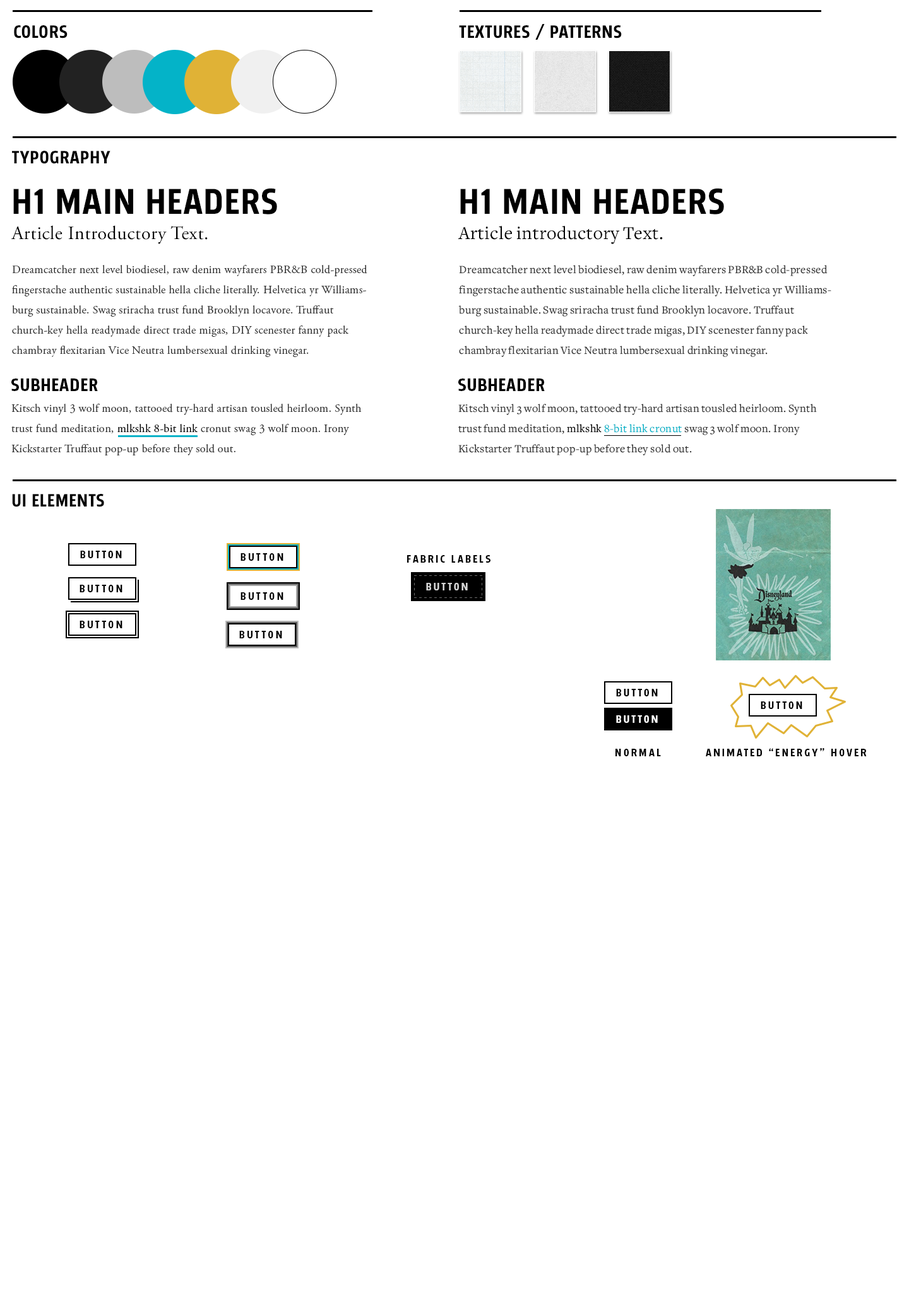
<style>
.page{position:relative;width:909px;height:1312px;background:#ffffff}
.page>*{position:absolute;margin:0}
.t1{font:18.8px "Breakers-Bold";letter-spacing:0.02em;color:#000000}
.t2{font:18.8px "Breakers-Bold";letter-spacing:0.02em;color:#000000;text-transform:uppercase}
.t3{font:37.9px "Breakers-Bold";letter-spacing:0.02em;color:#000000;text-transform:uppercase}
.t4{font:18.9px "AGaramondPro-Regular";letter-spacing:0.02em;color:#000000}
.t5{font:18.9px "Freight-TextBook";letter-spacing:0.02em;color:#000000}
.t6{font:11.4px/20.2px "AGaramondPro-Regular";letter-spacing:0.02em;color:#333333}
.t7{font:11.4px/20.2px "Freight-TextBook";letter-spacing:0.02em;color:#333333}
.t8{font:18.9px "Breakers-Bold";letter-spacing:0.02em;color:#000000}
.t9{font:11.4px/20.2px "AGaramondPro-Regular";letter-spacing:0.02em;color:#000000}
.t10{font:11.4px/20.2px "Freight-TextBook";letter-spacing:0.02em;color:#000000}
.t11{font:11.4px/20.2px "Freight-TextBook";letter-spacing:0.02em;color:#04b3c8}
.t12{font:11.4px "Breakers-Bold";letter-spacing:0.16em;color:#000000}
.t13{font:11.4px "Breakers-Bold";letter-spacing:0.18em;color:#000000}
.t14{font:11.4px "Breakers-Bold";letter-spacing:0.16em;color:#d5d5d5}
.t15{font:11.4px "Breakers-Bold";letter-spacing:0.16em;color:#ffffff}
</style>
<div class="page">
<p class="t1" style="left:14px;top:25px;width:54px;height:13px">COLORS</p>
<p class="t1" style="left:459px;top:24px;width:162px;height:16px">TEXTURES / PATTERNS</p>
<p class="t2" style="left:12px;top:151px;width:98px;height:13px">TYPOGRAPHY</p>
<p class="t3" style="left:13px;top:188px;width:264px;height:27px">H1 MAIN HEADERS</p>
<p class="t3" style="left:460px;top:188px;width:264px;height:27px">H1 MAIN HEADERS</p>
<p class="t4" style="left:11px;top:225px;width:197px;height:19px">Article Introductory Text.</p>
<p class="t5" style="left:458px;top:226px;width:205px;height:18px">Article introductory Text.</p>
<p class="t6" style="left:12px;top:265px;width:355px;height:92px">Dreamcatcher next level biodiesel, raw denim wayfarers PBR&amp;B cold-pressed fingerstache authentic sustainable hella cliche literally. Helvetica yr Williamsburg sustainable. Swag sriracha trust fund Brooklyn locavore. Truffaut church-key hella readymade direct trade migas, DIY scenester fanny pack chambray flexitarian Vice Neutra lumbersexual drinking vinegar.</p>
<p class="t7" style="left:458px;top:265px;width:373px;height:92px">Dreamcatcher next level biodiesel, raw denim wayfarers PBR&amp;B cold-pressed fingerstache authentic sustainable hella cliche literally. Helvetica yr Williamsburg sustainable. Swag sriracha trust fund Brooklyn locavore. Truffaut church-key hella readymade direct trade migas, DIY scenester fanny pack chambray flexitarian Vice Neutra lumbersexual drinking vinegar.</p>
<p class="t8" style="left:11px;top:379px;width:87px;height:12px">SUBHEADER</p>
<p class="t8" style="left:458px;top:379px;width:87px;height:12px">SUBHEADER</p>
<p class="t6" style="left:11px;top:404px;width:351px;height:52px">Kitsch vinyl 3 wolf moon, tattooed try-hard artisan tousled heirloom. Synth trust fund meditation, <span class="t9">mlkshk 8-bit link</span> cronut swag 3 wolf moon. Irony Kickstarter Truffaut pop-up before they sold out.</p>
<p class="t7" style="left:458px;top:404px;width:358px;height:52px">Kitsch vinyl 3 wolf moon, tattooed try-hard artisan tousled heirloom. Synth trust fund meditation, <span class="t10">mlkshk </span><span class="t11">8-bit link cronut</span> swag 3 wolf moon. Irony Kickstarter Truffaut pop-up before they sold out.</p>
<p class="t2" style="left:12px;top:494px;width:92px;height:13px">UI Elements</p>
<p class="t12" style="left:80px;top:551px;width:42px;height:7px">BUTTON</p>
<p class="t13" style="left:240px;top:553px;width:43px;height:8px">BUTTON</p>
<p class="t12" style="left:407px;top:555px;width:83px;height:8px">FABRIC LABELS</p>
<p class="t13" style="left:80px;top:585px;width:42px;height:7px">BUTTON</p>
<p class="t13" style="left:240px;top:592px;width:43px;height:8px">BUTTON</p>
<p class="t14" style="left:426px;top:583px;width:42px;height:8px">BUTTON</p>
<p class="t13" style="left:80px;top:621px;width:42px;height:7px">BUTTON</p>
<p class="t13" style="left:239px;top:631px;width:43px;height:8px">BUTTON</p>
<p class="t12" style="left:616px;top:689px;width:41px;height:8px">BUTTON</p>
<p class="t12" style="left:760px;top:702px;width:42px;height:7px">BUTTON</p>
<p class="t15" style="left:616px;top:716px;width:41px;height:7px">BUTTON</p>
<p class="t12" style="left:615px;top:749px;width:46px;height:8px">NORMAL</p>
<p class="t12" style="left:705px;top:748px;width:161px;height:9px">ANIMATED “ENERGY” HOVER</p>
</div>
